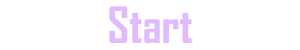
<style>
.page{position:relative;width:300px;height:50px;background:#ffffff}
.page>*{position:absolute;margin:0}
.t1{font:48px "AgencyFB-Bold";color:#e0bcff}
</style>
<div class="page">
<p class="t1" style="left:109px;top:6px;width:83px;height:38px">Start</p>
</div>
